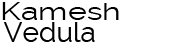
<style>
.page{position:relative;width:175px;height:46px;background:#ffffff}
.page>*{position:absolute;margin:0}
.t1{font:25px "Raleway";color:#000000;scale:1.29 1}
.t2{font:28px "Raleway";color:#000000}
</style>
<div class="page">
<p class="t1" style="left:2px;top:2px;width:117px;height:18px">Kamesh</p>
<p class="t2" style="left:4px;top:22px;width:91px;height:20px">Vedula</p>
</div>
